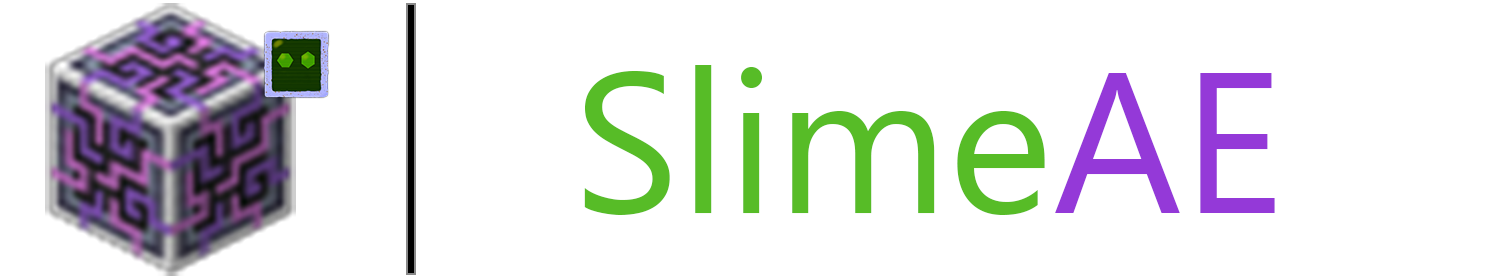
<style>
.page{position:relative;width:1500px;height:278px;background:#ffffff}
.page>*{position:absolute;margin:0}
.t1{font:200px "Ebrima";color:#57bc27}
.t2{font:200px "Ebrima";color:#9439d8}
</style>
<div class="page">
<p class="t1" style="left:584px;top:65px;width:691px;height:150px">Slime<span class="t2">AE</span></p>
</div>
